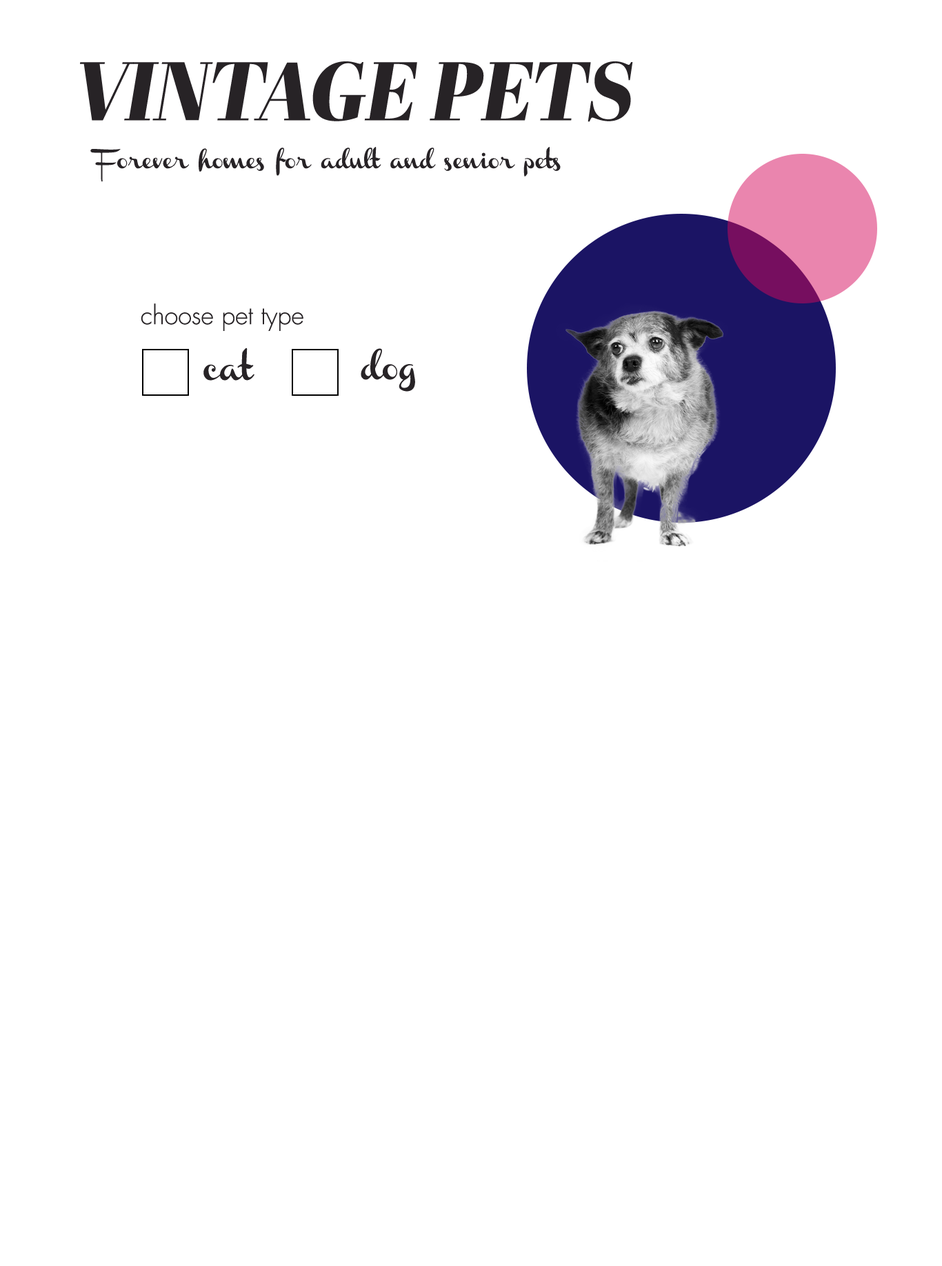
<style>
.page{position:relative;width:942px;height:1266px;background:#ffffff}
.page>*{position:absolute;margin:0}
.t1{font:82.7px "AbrilFatface-Italic";color:#272326}
.t2{font:16.5px "Channel";color:#272326}
.t3{font:24.8px "Futura-Light";color:#272326}
.t4{font:24.8px "Channel";color:#272326}
</style>
<div class="page">
<p class="t1" style="left:80px;top:61px;width:553px;height:61px">VINTAGE PETS</p>
<p class="t2" style="left:90px;top:147px;width:471px;height:35px;text-align:right">Forever homes for adult and senior pets</p>
<p class="t3" style="left:141px;top:303px;width:162px;height:28px">choose pet type</p>
<p class="t4" style="left:203px;top:348px;width:51px;height:33px">cat</p>
<p class="t4" style="left:361px;top:348px;width:54px;height:44px">dog</p>
</div>
